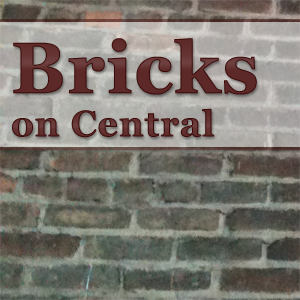
<style>
.page{position:relative;width:300px;height:300px}
.page>*{position:absolute;margin:0}
.t1{font:36px "Georgia-Bold";color:#5c2928;font-weight:bold}
.t2{font:72px "Georgia-Bold";color:#5c2928;font-weight:bold}
</style>
<div class="page">
<p class="t1" style="left:12px;top:38px;width:245px;height:100px"><span class="t2">Bricks<br></span>on Central</p>
</div>
